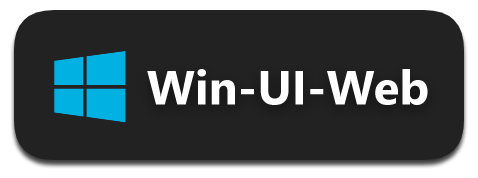
<style>
.page{position:relative;width:478px;height:178px;background:#222222}
.page>*{position:absolute;margin:0}
.t1{font:48px "SegoeUI-Bold";color:#ffffff}
</style>
<div class="page">
<p class="t1" style="left:147px;top:69px;width:281px;height:36px">Win-UI-Web</p>
</div>
